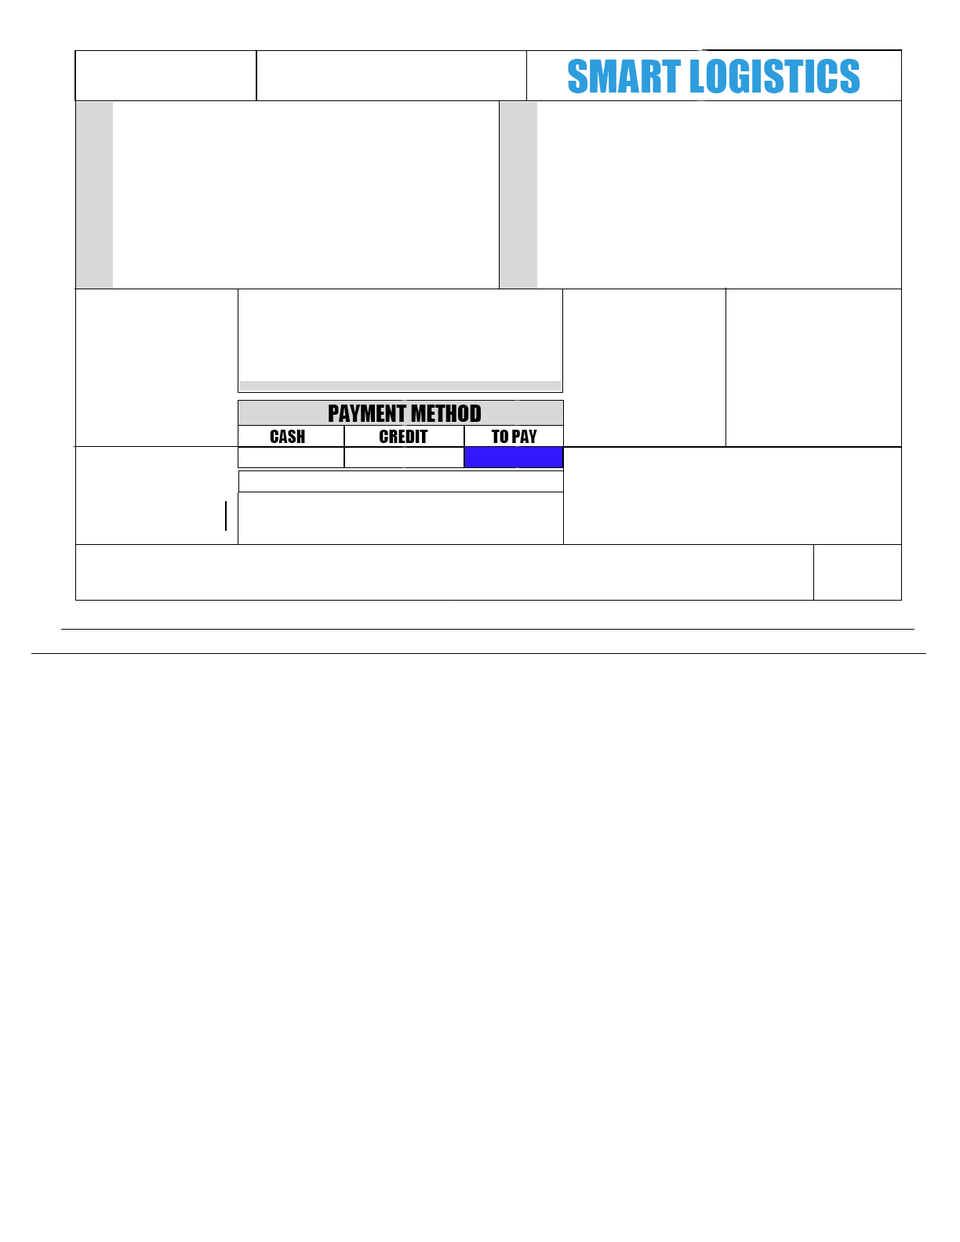
<style>
.page{position:relative;width:960px;height:1242px;background:#ffffff}
.page>*{position:absolute;margin:0}
.t1{font:41.8px "Impact";color:#2d9ddd}
.t2{font:21.8px "Impact";color:#000000}
.t3{font:16.8px "Impact";color:#000000}
.t4{font:17.4px "Impact";color:#000000}
.t5{font:17px "Impact";color:#000000}
</style>
<div class="page">
<p class="t1" style="left:568px;top:59px;width:292px;height:34px">SMART LOGISTICS</p>
<p class="t2" style="left:329px;top:405px;width:152px;height:17px">PAYMENT METHOD</p>
<p class="t3" style="left:270px;top:430px;width:35px;height:13px">CASH</p>
<p class="t4" style="left:380px;top:430px;width:48px;height:13px">CREDIT</p>
<p class="t5" style="left:491px;top:430px;width:46px;height:13px">TO PAY</p>
</div>
